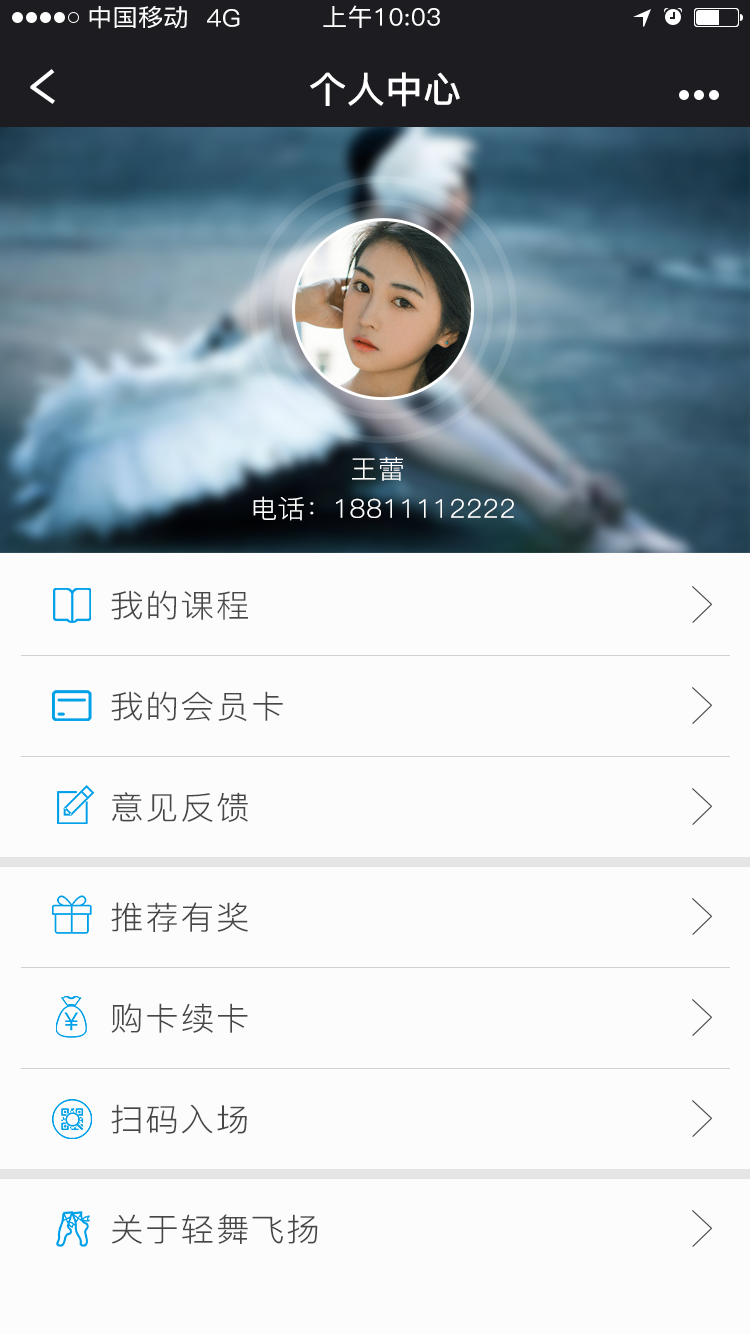
<style>
.page{position:relative;width:750px;height:1334px;background:#fcfcfc}
.page>*{position:absolute;margin:0}
.t1{font:24px "PingFang-SC-Medium";letter-spacing:0.01em;color:#ffffff;scale:1.05 1}
.t2{font:36px "PingFang-SC-Bold";letter-spacing:0.01em;color:#ffffff;scale:1.05 1}
.t3{font:26px "PingFang-SC-Regular";letter-spacing:0.01em;color:#ffffff;scale:1.05 1}
.t4{font:32px "PingFang-SC-Regular";letter-spacing:0.05em;color:#474747;scale:1.05 1}
</style>
<div class="page">
<p class="t1" style="left:89px;top:6px;width:98px;height:23px">中国移动</p>
<p class="t1" style="left:323px;top:5px;width:117px;height:23px">上午10:03</p>
<p class="t1" style="left:207px;top:9px;width:33px;height:18px">4G</p>
<p class="t2" style="left:310px;top:72px;width:150px;height:35px">个人中心</p>
<p class="t3" style="left:352px;top:457px;width:51px;height:24px">王蕾</p>
<p class="t3" style="left:253px;top:496px;width:261px;height:25px">电话：18811112222</p>
<p class="t4" style="left:111px;top:590px;width:137px;height:30px">我的课程</p>
<p class="t4" style="left:111px;top:691px;width:172px;height:30px">我的会员卡</p>
<p class="t4" style="left:112px;top:792px;width:136px;height:30px">意见反馈</p>
<p class="t4" style="left:111px;top:902px;width:137px;height:30px">推荐有奖</p>
<p class="t4" style="left:111px;top:1003px;width:137px;height:30px">购卡续卡</p>
<p class="t4" style="left:111px;top:1104px;width:136px;height:30px">扫码入场</p>
<p class="t4" style="left:112px;top:1214px;width:206px;height:30px">关于轻舞飞扬</p>
</div>
